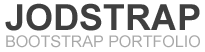
<style>
.page{position:relative;width:205px;height:52px;background:#ffffff}
.page>*{position:absolute;margin:0}
.t1{font:36px "Arial-BoldMT";color:#3f3f3f;text-transform:uppercase}
.t2{font:16px "ArialMT";color:#a8a8a8;text-transform:uppercase}
</style>
<div class="page">
<p class="t1" style="left:5px;top:3px;width:195px;height:28px">Jodstrap</p>
<p class="t2" style="left:6px;top:35px;width:194px;height:13px">Bootstrap Portfolio</p>
</div>
